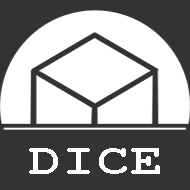
<style>
.page{position:relative;width:190px;height:190px;background:#333333}
.page>*{position:absolute;margin:0}
.t1{font:45.4px "CourierNewPS-BoldMT";letter-spacing:0.02em;color:#fffefe;scale:1.2 1}
</style>
<div class="page">
<p class="t1" style="left:29px;top:148px;width:131px;height:26px">DICE</p>
</div>
